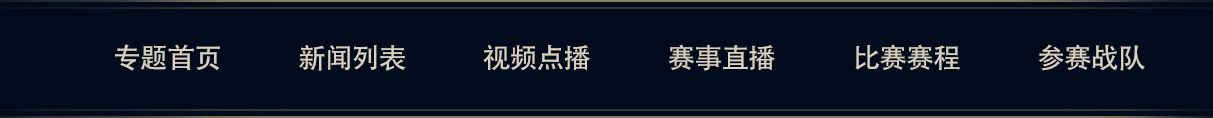
<style>
.page{position:relative;width:1213px;height:118px;background:#010b1c}
.page>*{position:absolute;margin:0}
.t1{font:27.6px "AdobeHeitiStd-Regular";letter-spacing:-0.025em;color:#d9d0bf;text-transform:uppercase}
</style>
<div class="page">
<p class="t1" style="left:115px;top:44px;width:1030px;height:27px">专题首页              新闻列表              视频点播              赛事直播              比赛赛程              参赛战队</p>
</div>
